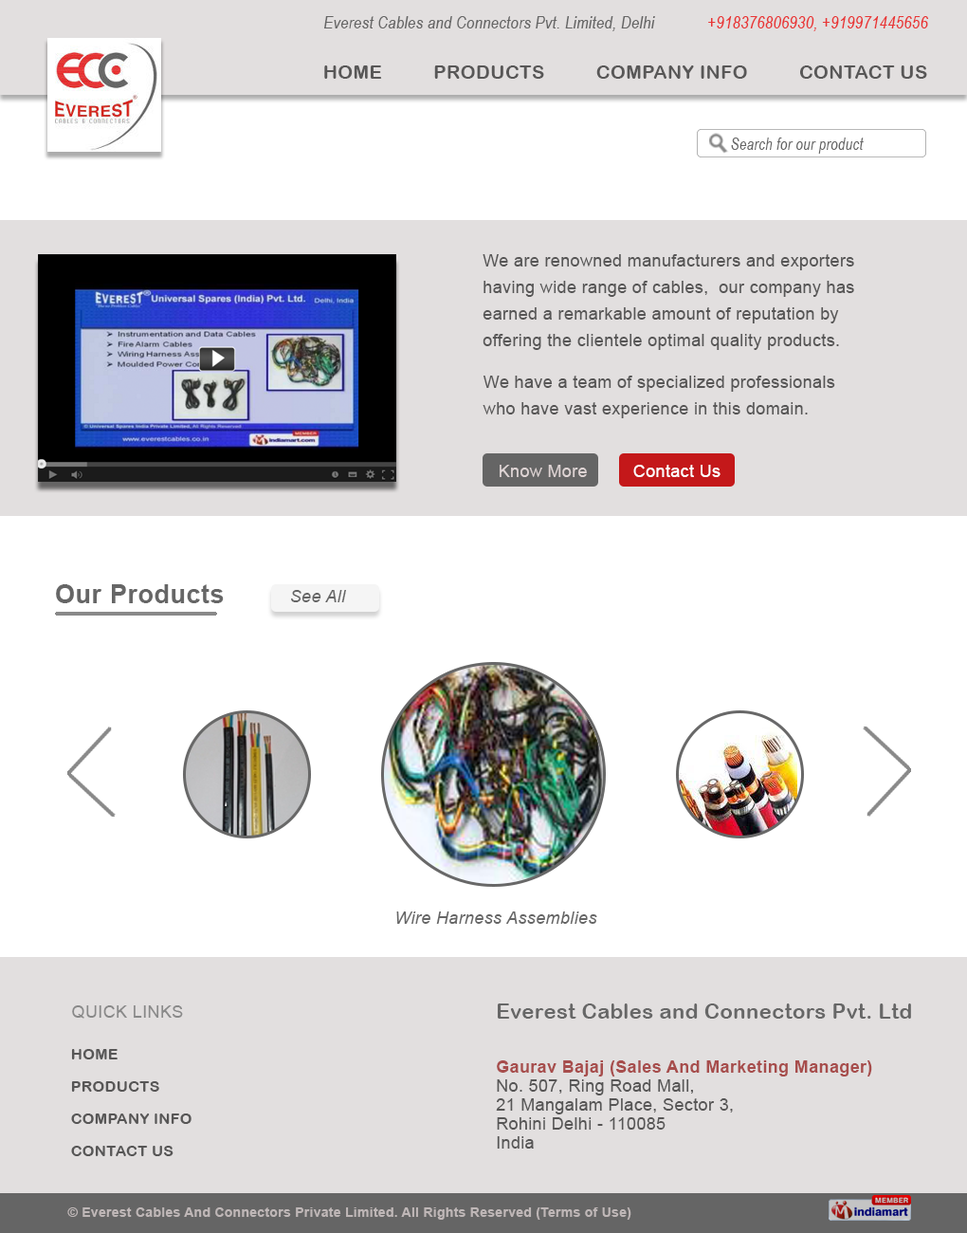
<style>
.page{position:relative;width:967px;height:1233px;background:#ffffff}
.page>*{position:absolute;margin:0}
.t1{font:17.1px "ArialNarrow-Italic";letter-spacing:0.02em;color:#666666}
.t2{font:17.1px "ArialNarrow-Italic";letter-spacing:0.02em;color:#e83333}
.t3{font:19px "ArialRoundedMTBold";letter-spacing:0.02em;color:#575656}
.t4{font:17.1px "ArialNarrow-Italic";letter-spacing:0.02em;color:#676767;scale:0.9 1}
.t5{font:17.1px/26.6px "ArialMT";letter-spacing:0.02em;color:#575656}
.t6{font:17.1px "ArialMT";letter-spacing:0.02em;color:#ddd3d3}
.t7{font:17.1px "ArialMT";letter-spacing:0.02em;color:#fefefe}
.t8{font:25.6px "Arial-BoldMT";letter-spacing:0.02em;color:#666666}
.t9{font:17.1px "Arial-ItalicMT";letter-spacing:0.02em;color:#666666}
.t10{font:17.1px "ArialMT";letter-spacing:0.02em;color:#898989}
.t11{font:17.1px/19px "ArialMT";letter-spacing:0.02em;color:#575656}
.t12{font:20.9px/16.1px "ArialRoundedMTBold";letter-spacing:0.02em;color:#676767}
.t13{font:17.1px/19px "Arial-BoldMT";letter-spacing:0.02em;color:#a74d4c}
.t14{font:15.2px/16.1px "ArialRoundedMTBold";letter-spacing:0.02em;color:#575656}
.t15{font:13.3px "Arial-BoldMT";letter-spacing:0.02em;color:#bfb7b7}
</style>
<div class="page">
<p class="t1" style="left:324px;top:16px;width:331px;height:15px">Everest Cables and Connectors Pvt. Limited, Delhi</p>
<p class="t2" style="left:708px;top:16px;width:220px;height:15px">+918376806930, +919971445656</p>
<p class="t3" style="left:324px;top:65px;width:603px;height:14px">HOME          PRODUCTS          COMPANY INFO          CONTACT US</p>
<p class="t4" style="left:731px;top:138px;width:133px;height:16px">Search for our product<br>vv</p>
<p class="t5" style="left:483px;top:254px;width:371px;height:96px">We are renowned manufacturers and exporters <br>having wide range of cables,  our company has <br>earned a remarkable amount of reputation by <br>offering the clientele optimal quality products.</p>
<p class="t5" style="left:483px;top:376px;width:352px;height:42px">We have a team of specialized professionals <br>who have vast experience in this domain.</p>
<p class="t6" style="left:500px;top:465px;width:87px;height:12px">Know More</p>
<p class="t7" style="left:633px;top:465px;width:88px;height:12px">Contact Us</p>
<p class="t8" style="left:56px;top:584px;width:168px;height:19px">Our Products</p>
<p class="t9" style="left:291px;top:590px;width:55px;height:12px">See All</p>
<p class="t9" style="left:396px;top:911px;width:201px;height:13px">Wire Harness Assemblies</p>
<p class="t10" style="left:72px;top:1005px;width:111px;height:13px">QUICK LINKS</p>
<p class="t11" style="left:496px;top:1003px;width:415px;height:145px"><span class="t12">Everest Cables and Connectors Pvt. Ltd<br><br></span><span class="t13"><br>Gaurav Bajaj (Sales And Marketing Manager)<br></span>No. 507, Ring Road Mall, <br>21 Mangalam Place, Sector 3, <br>Rohini Delhi - 110085<br>India</p>
<p class="t14" style="left:71px;top:1049px;width:121px;height:107px">HOME<br>          <br>PRODUCTS<br>      <br>COMPANY INFO<br>          <br>CONTACT US</p>
<p class="t15" style="left:67px;top:1207px;width:565px;height:13px">© Everest Cables And Connectors Private Limited. All Rights Reserved (Terms of Use)</p>
</div>
